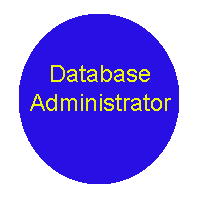
<style>
.page{position:relative;width:200px;height:200px;background:#280fe4}
.page>*{position:absolute;margin:0}
.t1{font:24px "ArialMT";color:#eef60a}
</style>
<div class="page">
<p class="t1" style="left:30px;top:65px;width:141px;height:46px;text-align:center">Database<br>Administrator</p>
</div>
